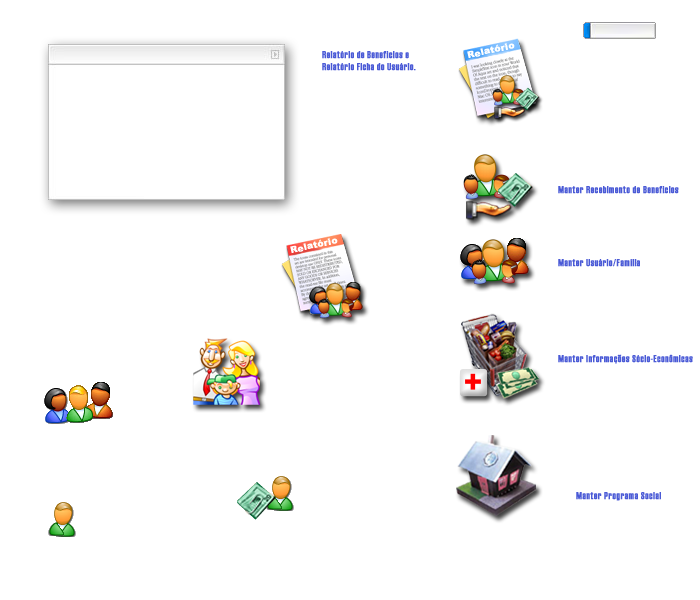
<style>
.page{position:relative;width:700px;height:600px;background:#ffffff}
.page>*{position:absolute;margin:0}
.t1{font:10px "Haettenschweiler";letter-spacing:0.02em;color:#4a5ad6;font-weight:bold}
.t2{font:9px "Arial-Black";letter-spacing:0.02em;color:#ffffff;font-weight:bold}
</style>
<div class="page">
<p class="t1" style="left:322px;top:51px;width:94px;height:20px">Relatório de Benefícios e <br>Relatório Ficha do Usuário.</p>
<p class="t2" style="left:467px;top:43px;width:48px;height:15px;rotate:-13deg">Relatório</p>
<p class="t1" style="left:558px;top:186px;width:121px;height:8px">Manter Recebimento de Benefícios</p>
<p class="t2" style="left:290px;top:238px;width:48px;height:15px;rotate:-13deg">Relatório</p>
<p class="t1" style="left:558px;top:259px;width:82px;height:8px">Manter Usuário/Família</p>
<p class="t1" style="left:558px;top:354px;width:135px;height:10px">Manter Informações Sócio-Econômicas</p>
<p class="t1" style="left:576px;top:492px;width:85px;height:9px">Manter Programa Social</p>
</div>
